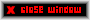
<style>
.page{position:relative;width:90px;height:20px;background:#000000}
.page>*{position:absolute;margin:0}
.t1{font:9px "04b19";color:#ff0000}
</style>
<div class="page">
<p class="t1" style="left:21px;top:6px;width:60px;height:7px">close window</p>
</div>
